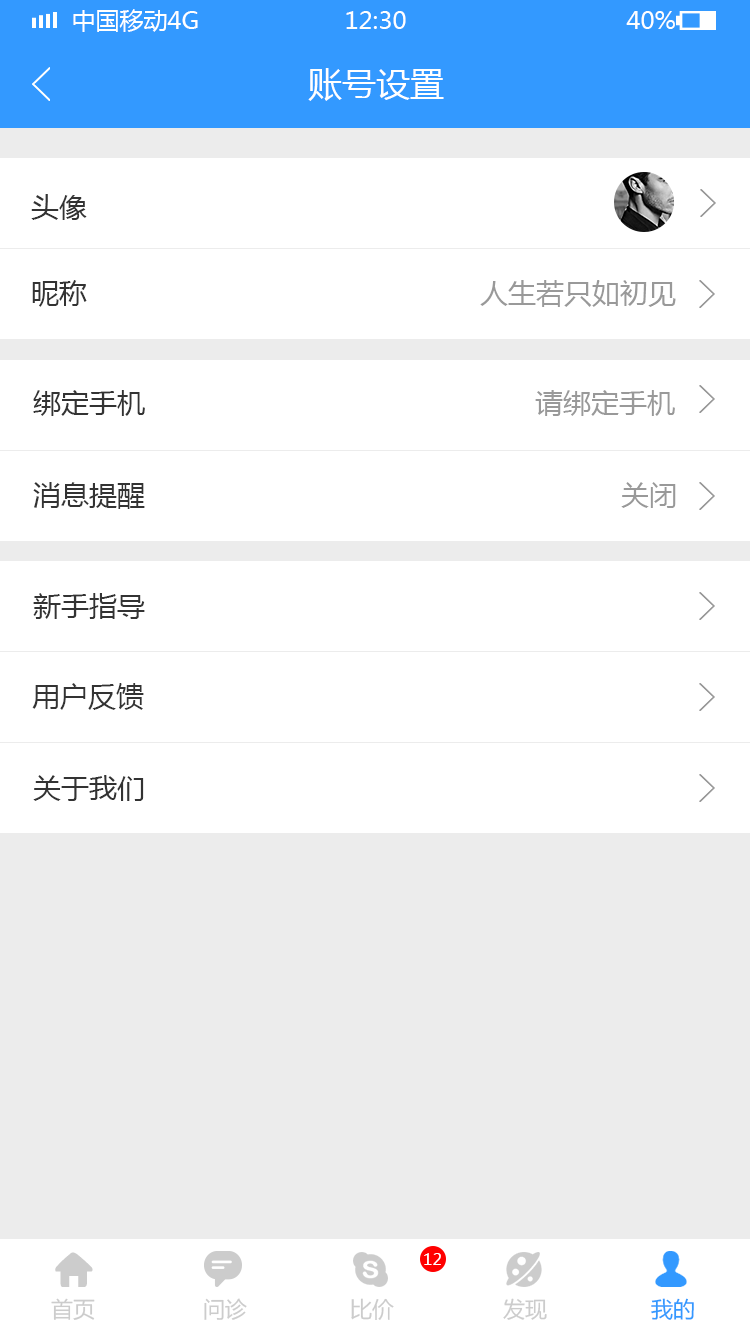
<style>
.page{position:relative;width:750px;height:1334px;background:#ffffff}
.page>*{position:absolute;margin:0}
.t1{font:24px "MicrosoftYaHei";color:#ffffff;text-transform:uppercase}
.t2{font:34px "MicrosoftYaHei";color:#ffffff}
.t3{font:28px "MicrosoftYaHei";color:#333333}
.t4{font:28px "MicrosoftYaHei";color:#999999}
.t5{font:16px "MicrosoftYaHei";color:#ffffff}
.t6{font:22px "MicrosoftYaHei";color:#cccccc}
.t7{font:22px "MicrosoftYaHei";color:#3399ff}
</style>
<div class="page">
<p class="t1" style="left:73px;top:9px;width:125px;height:23px">中国移动4G</p>
<p class="t1" style="left:346px;top:11px;width:60px;height:18px">12:30</p>
<p class="t1" style="left:626px;top:11px;width:49px;height:18px">40%</p>
<p class="t2" style="left:308px;top:68px;width:136px;height:33px">账号设置</p>
<p class="t3" style="left:31px;top:194px;width:56px;height:26px">头像</p>
<p class="t3" style="left:32px;top:280px;width:55px;height:27px">昵称</p>
<p class="t4" style="left:480px;top:280px;width:196px;height:27px">人生若只如初见</p>
<p class="t3" style="left:33px;top:390px;width:112px;height:26px">绑定手机</p>
<p class="t4" style="left:535px;top:390px;width:140px;height:26px">请绑定手机</p>
<p class="t3" style="left:33px;top:482px;width:112px;height:27px">消息提醒</p>
<p class="t4" style="left:621px;top:482px;width:55px;height:26px">关闭</p>
<p class="t3" style="left:33px;top:593px;width:112px;height:26px">新手指导</p>
<p class="t3" style="left:32px;top:683px;width:112px;height:27px">用户反馈</p>
<p class="t3" style="left:33px;top:775px;width:111px;height:26px">关于我们</p>
<p class="t5" style="left:424px;top:1253px;width:17px;height:12px">12</p>
<p class="t6" style="left:51px;top:1298px;width:44px;height:22px">首页</p>
<p class="t6" style="left:204px;top:1298px;width:43px;height:22px">问诊</p>
<p class="t6" style="left:351px;top:1298px;width:43px;height:22px">比价</p>
<p class="t6" style="left:503px;top:1298px;width:44px;height:22px">发现</p>
<p class="t7" style="left:651px;top:1298px;width:43px;height:22px">我的</p>
</div>
